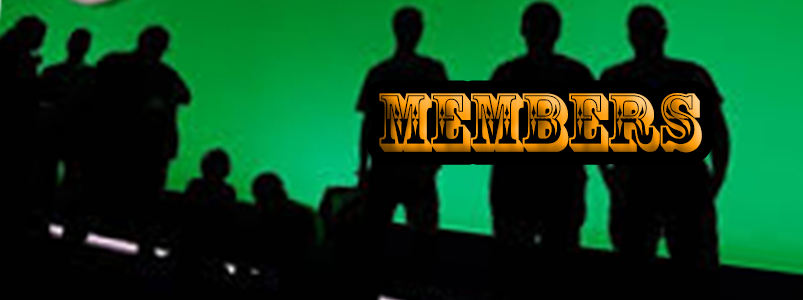
<style>
.page{position:relative;width:803px;height:300px;background:#010101}
.page>*{position:absolute;margin:0}
.t1{font:77.3px "RosewoodStd-Regular"}
</style>
<div class="page">
<p class="t1" style="left:379px;top:93px;width:323px;height:60px">Members</p>
</div>
